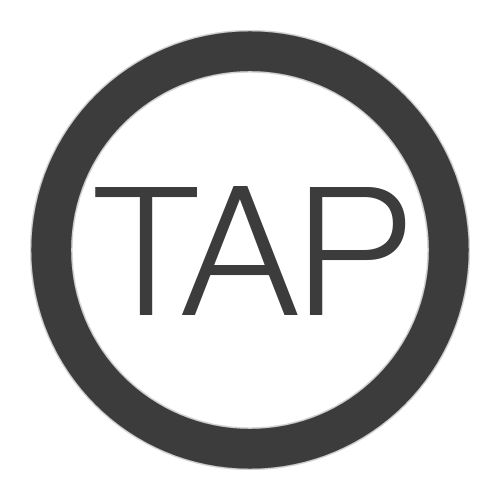
<style>
.page{position:relative;width:500px;height:500px;background:#ffffff}
.page>*{position:absolute;margin:0}
.t1{font:180px "HelveticaNeue-Light";color:#3c3c3c}
</style>
<div class="page">
<p class="t1" style="left:95px;top:186px;width:311px;height:129px">TAP</p>
</div>
